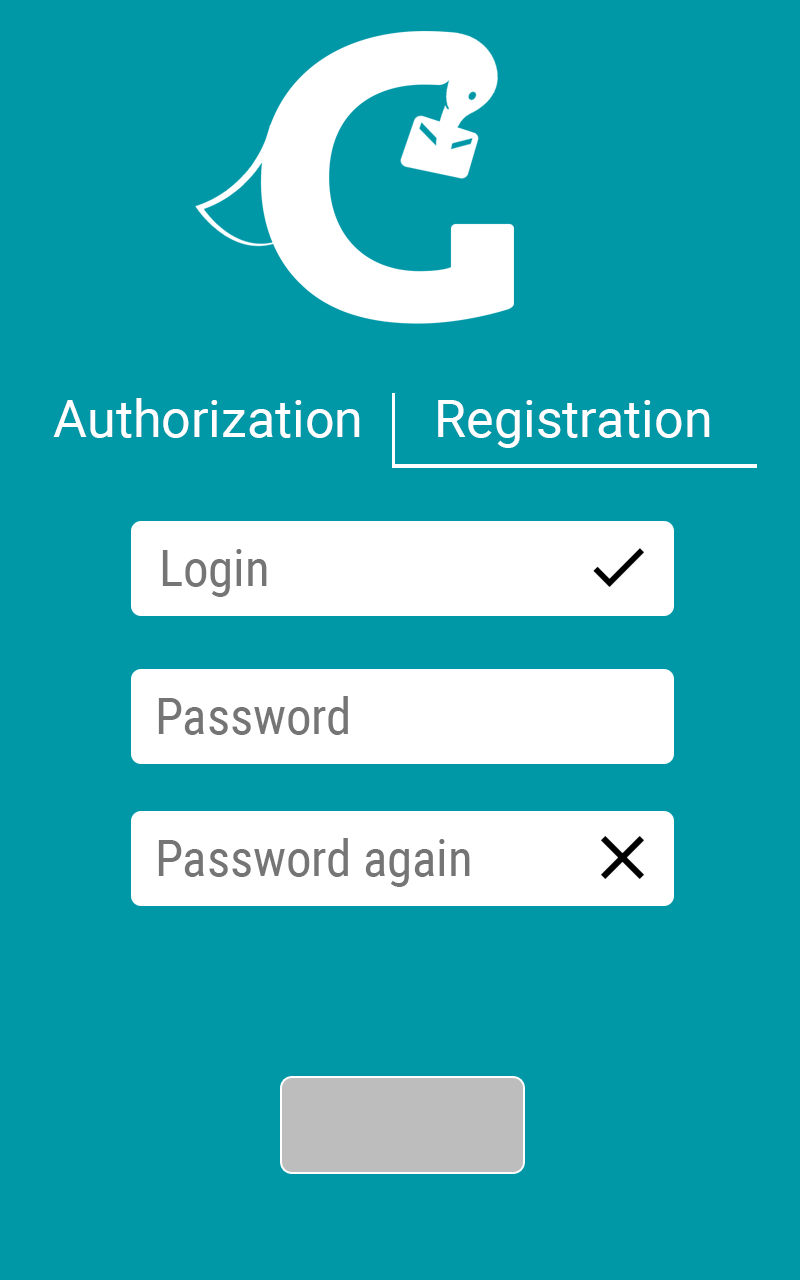
<style>
.page{position:relative;width:800px;height:1280px;background:#0097a7}
.page>*{position:absolute;margin:0}
.t1{font:52px "Roboto-Regular";color:#ffffff}
.t2{font:50.7px "RobotoCondensed-Regular";color:#757575}
</style>
<div class="page">
<p class="t1" style="left:53px;top:398px;width:307px;height:40px">Authorization</p>
<p class="t1" style="left:438px;top:400px;width:272px;height:48px">Registration</p>
<p class="t2" style="left:162px;top:549px;width:105px;height:48px">Login</p>
<p class="t2" style="left:158px;top:696px;width:190px;height:39px">Password</p>
<p class="t2" style="left:158px;top:838px;width:312px;height:49px">Password again</p>
</div>
